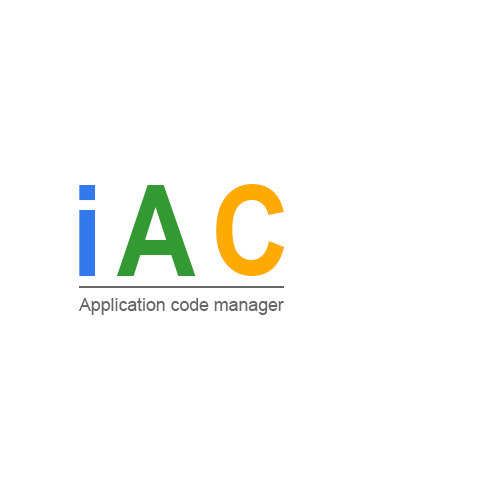
<style>
.page{position:relative;width:500px;height:500px;background:#ffffff}
.page>*{position:absolute;margin:0}
.t1{font:127.2px "Arial-BoldMT";color:#3379ee;scale:0.91 1}
.t2{font:127.2px "Arial-BoldMT";color:#339933;scale:0.85 1}
.t3{font:127.2px "Arial-BoldMT";color:#ffaa00;scale:0.86 1}
.t4{font:17.8px "ArialMT";color:#666666}
</style>
<div class="page">
<p class="t1" style="left:79px;top:185px;width:17px;height:91px">i</p>
<p class="t2" style="left:116px;top:185px;width:80px;height:91px">A</p>
<p class="t3" style="left:216px;top:184px;width:69px;height:92px">C</p>
<p class="t4" style="left:78px;top:298px;width:206px;height:17px">Application code manager</p>
</div>
